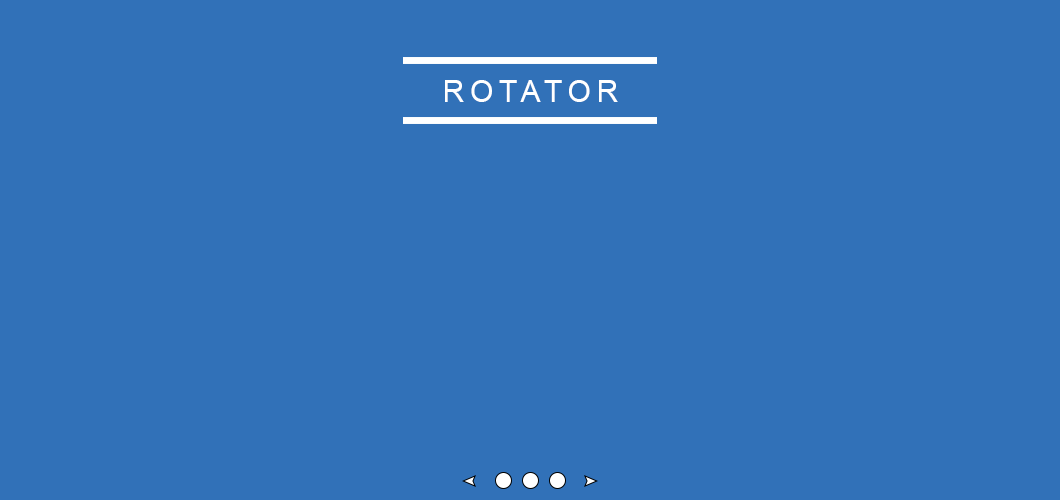
<style>
.page{position:relative;width:1060px;height:500px;background:#3171b8}
.page>*{position:absolute;margin:0}
.t1{font:30px "ArialMT";letter-spacing:0.19em;color:#ffffff}
</style>
<div class="page">
<p class="t1" style="left:445px;top:80px;width:173px;height:22px">ROTATOR</p>
</div>
